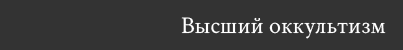
<style>
.page{position:relative;width:403px;height:50px;background:#333333}
.page>*{position:absolute;margin:0}
.t1{font:24px "CrimsonText-Regular";color:#ffffff}
</style>
<div class="page">
<p class="t1" style="left:181px;top:17px;width:205px;height:22px">Высший оккультизм</p>
</div>
